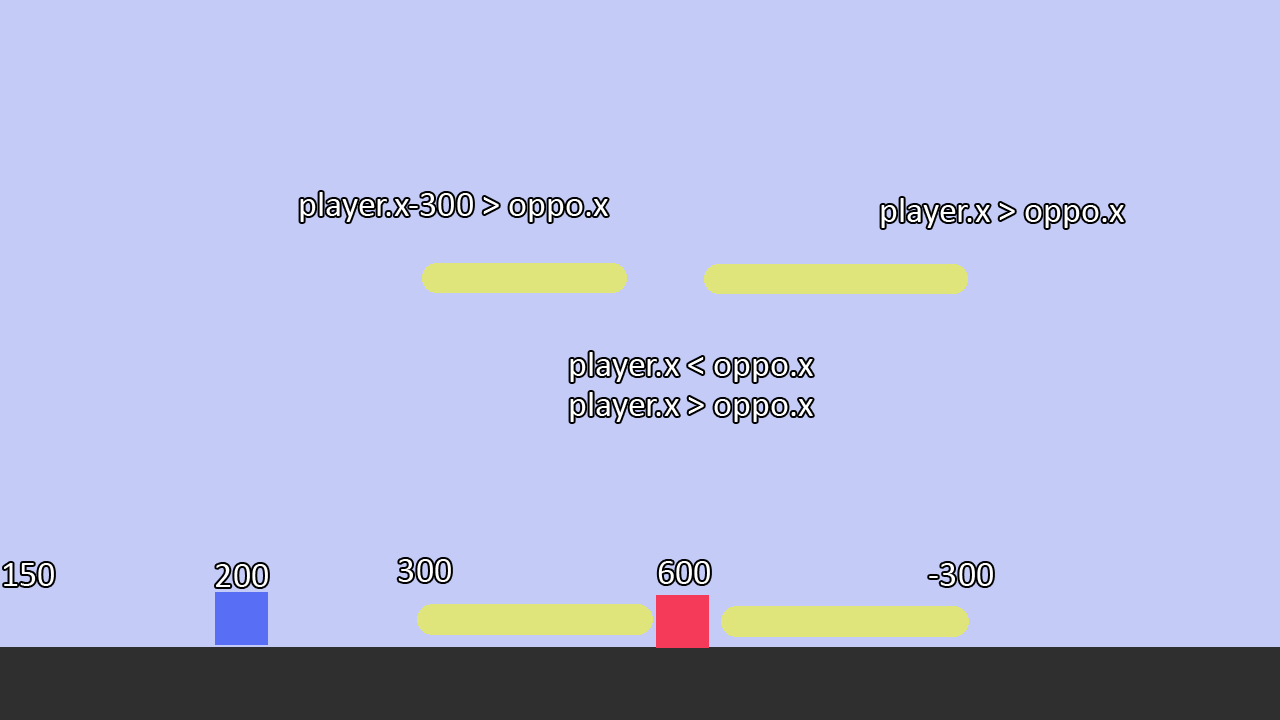
<style>
.page{position:relative;width:1280px;height:720px;background:#c3cbf6}
.page>*{position:absolute;margin:0}
.t1{font:36px "Calibri";color:#ffffff}
</style>
<div class="page">
<p class="t1" style="left:300px;top:192px;width:308px;height:30px">player.x-300 &gt; oppo.x</p>
<p class="t1" style="left:881px;top:198px;width:243px;height:30px">player.x &gt; oppo.x</p>
<p class="t1" style="left:570px;top:352px;width:243px;height:30px">player.x &lt; oppo.x</p>
<p class="t1" style="left:570px;top:392px;width:243px;height:30px">player.x &gt; oppo.x</p>
<p class="t1" style="left:4px;top:563px;width:50px;height:23px">150</p>
<p class="t1" style="left:216px;top:564px;width:52px;height:23px">200</p>
<p class="t1" style="left:398px;top:559px;width:53px;height:23px">300</p>
<p class="t1" style="left:658px;top:561px;width:52px;height:23px">600</p>
<p class="t1" style="left:929px;top:563px;width:64px;height:23px">-300</p>
</div>
